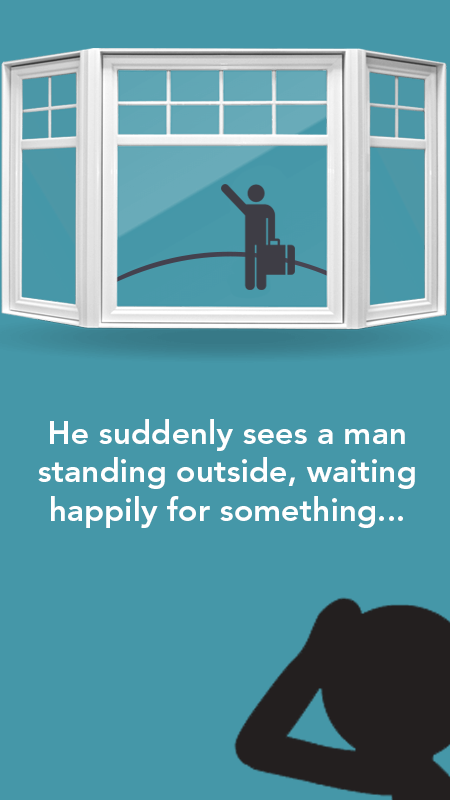
<style>
.page{position:relative;width:450px;height:800px;background:#4597a8}
.page>*{position:absolute;margin:0}
.t1{font:32px "AvenirLTStd-Heavy";color:#ffffff}
</style>
<div class="page">
<p class="t1" style="left:38px;top:419px;width:377px;height:109px;text-align:center">He suddenly sees a man<br>standing outside, waiting<br>happily for something...</p>
</div>
